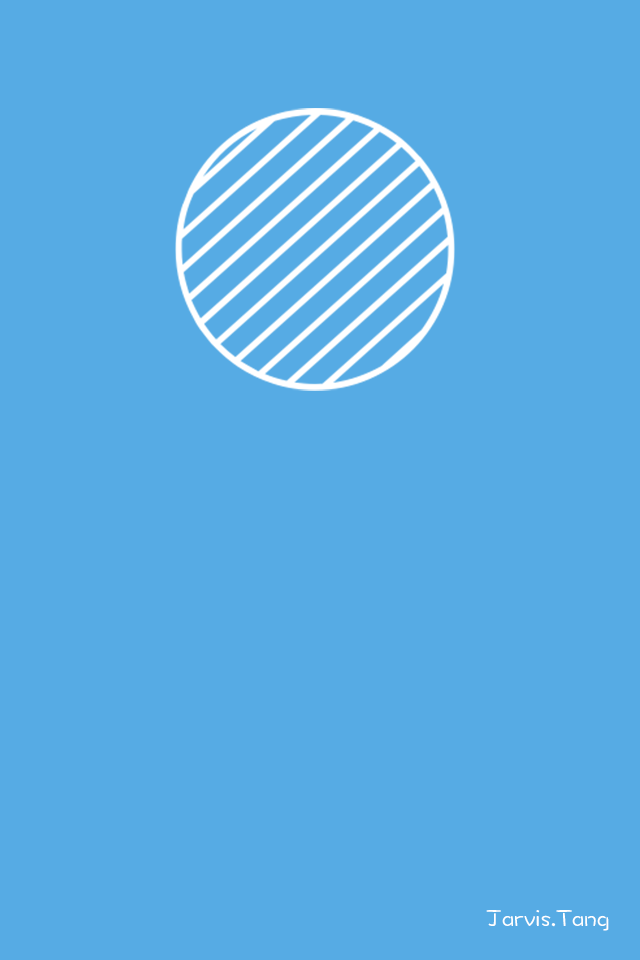
<style>
.page{position:relative;width:640px;height:960px;background:#56abe4}
.page>*{position:absolute;margin:0}
.t1{font:24px "DFWaWaSC-W5";color:#ffffff}
</style>
<div class="page">
<p class="t1" style="left:486px;top:910px;width:123px;height:21px">Jarvis.Tang</p>
</div>
